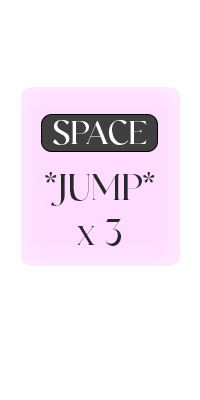
<style>
.page{position:relative;width:200px;height:400px;background:#ffffff}
.page>*{position:absolute;margin:0}
.t1{font:33.3px "BelganAesthetic-Regular";color:#ffffff}
.t2{font:37.5px "BelganAesthetic-Regular";color:#282828}
</style>
<div class="page">
<p class="t1" style="left:53px;top:120px;width:94px;height:25px">SPACE</p>
<p class="t2" style="left:45px;top:171px;width:110px;height:75px;text-align:center">*JUMP* <br>x 3</p>
</div>
